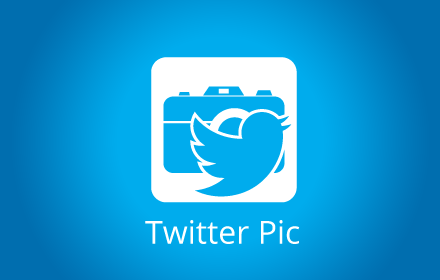
<style>
.page{position:relative;width:440px;height:280px}
.page>*{position:absolute;margin:0}
.t1{font:32px "OpenSans";color:#ffffff}
</style>
<div class="page">
<p class="t1" style="left:145px;top:220px;width:155px;height:24px">Twitter Pic</p>
</div>
